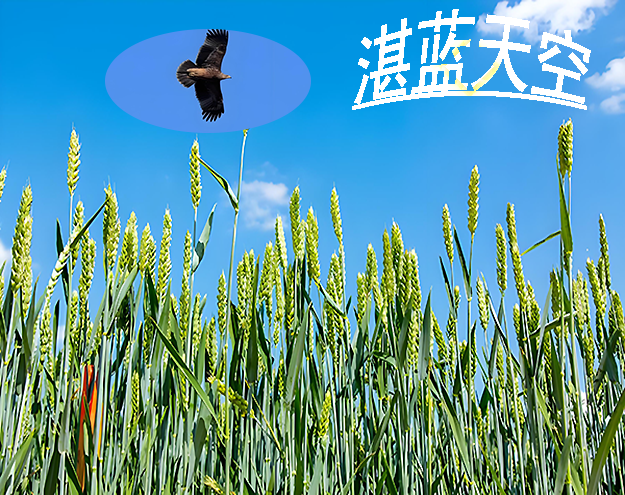
<style>
.page{position:relative;width:625px;height:495px}
.page>*{position:absolute;margin:0}
.t1{font:49.9px "SimHei";letter-spacing:0.002em;color:#f5f1f1;font-style:italic;text-decoration:underline;scale:1.14 1}
</style>
<div class="page">
<p class="t1" style="left:352px;top:9px;width:239px;height:101px;text-align:center">湛蓝天空</p>
</div>
